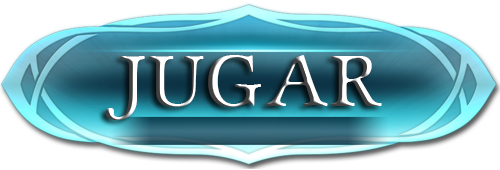
<style>
.page{position:relative;width:500px;height:170px;background:#ffffff}
.page>*{position:absolute;margin:0}
.t1{font:72px "ZapfInterMedium";color:#ffffff}
</style>
<div class="page">
<p class="t1" style="left:105px;top:55px;width:277px;height:65px">JUGAR</p>
</div>
